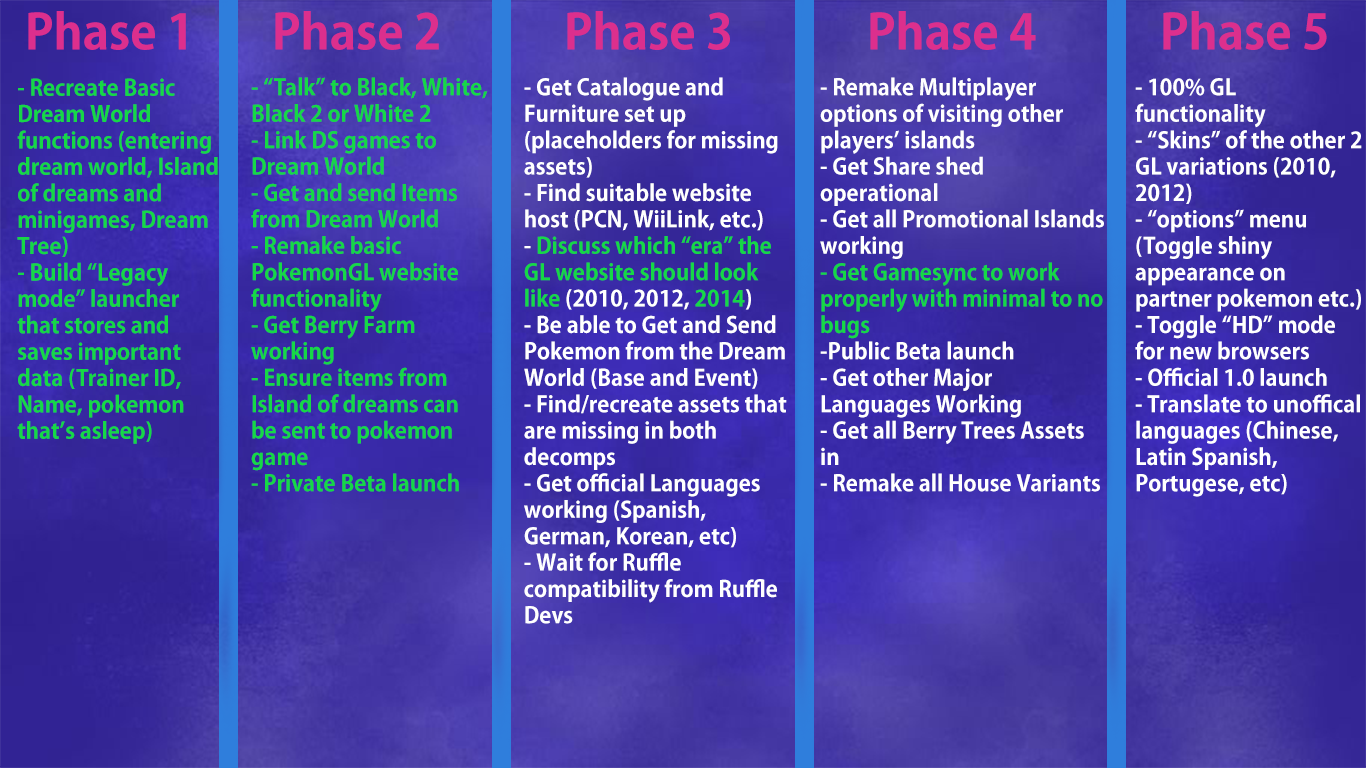
<style>
.page{position:relative;width:1366px;height:768px}
.page>*{position:absolute;margin:0}
.t1{font:48px "KozGoPr6N-Bold";color:#dc2f8d}
.t2{font:22px "KozGoPr6N-Bold";color:#16d846}
.t3{font:22px "KozGoPr6N-Bold";color:#ffffff}
</style>
<div class="page">
<p class="t1" style="left:28px;top:11px;width:158px;height:39px">Phase 1</p>
<p class="t1" style="left:275px;top:11px;width:164px;height:39px">Phase 2</p>
<p class="t1" style="left:567px;top:11px;width:163px;height:39px">Phase 3</p>
<p class="t1" style="left:870px;top:11px;width:166px;height:39px">Phase 4</p>
<p class="t1" style="left:1163px;top:11px;width:164px;height:39px">Phase 5</p>
<p class="t2" style="left:17px;top:78px;width:201px;height:366px">- Recreate Basic Dream World functions (entering dream world, Island of dreams and minigames, Dream Tree)<br>- Build “Legacy mode” launcher that stores and saves important data (Trainer ID, Name, pokemon that’s asleep)</p>
<p class="t2" style="left:251px;top:77px;width:237px;height:415px">- “Talk” to Black, White, Black 2 or White 2 <br>- Link DS games to Dream World<br>- Get and send Items from Dream World<br>- Remake basic PokemonGL website functionality <br>- Get Berry Farm working<br>- Ensure items from Island of dreams can be sent to pokemon game<br>- Private Beta launch</p>
<p class="t3" style="left:524px;top:77px;width:263px;height:547px">- Get Catalogue and Furniture set up (placeholders for missing assets)<br>- Find suitable website host (PCN, WiiLink, etc.)<br>- <span class="t2">Discuss which “era” the GL website should look like</span> (2010, 2012, <span class="t2">2014</span>)<br>- Be able to Get and Send Pokemon from the Dream World (Base and Event)<br>- Find/recreate assets that are missing in both decomps <br>- Get official Languages working (Spanish, German, Korean, etc)<br>- Wait for Ruffle compatibility from Ruffle Devs</p>
<p class="t3" style="left:820px;top:77px;width:284px;height:415px">- Remake Multiplayer options of visiting other players’ islands<br>- Get Share shed operational<br>- Get all Promotional Islands working<br><span class="t2">- Get Gamesync to work properly with minimal to no bugs<br></span>-Public Beta launch<br>- Get other Major Languages Working<br>- Get all Berry Trees Assets in<br>- Remake all House Variants</p>
<p class="t3" style="left:1135px;top:78px;width:227px;height:419px">- 100% GL functionality<br>- “Skins” of the other 2 GL variations (2010, 2012)<br>- “options” menu (Toggle shiny appearance on partner pokemon etc.)<br>- Toggle “HD” mode for new browsers<br>- Official 1.0 launch<br>- Translate to unoffical languages (Chinese, Latin Spanish, Portugese, etc)</p>
</div>
